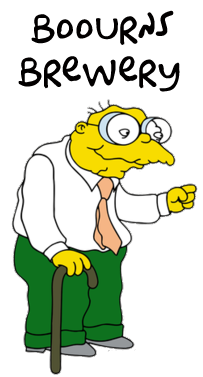
<style>
.page{position:relative;width:203px;height:377px;background:#ffffff}
.page>*{position:absolute;margin:0}
.t1{font:36px "Originally-compiled-by-Jon-Bernhardt.";color:#020000}
</style>
<div class="page">
<p class="t1" style="left:18px;top:10px;width:162px;height:82px;text-align:center">Boourns<br>Brewery</p>
</div>
